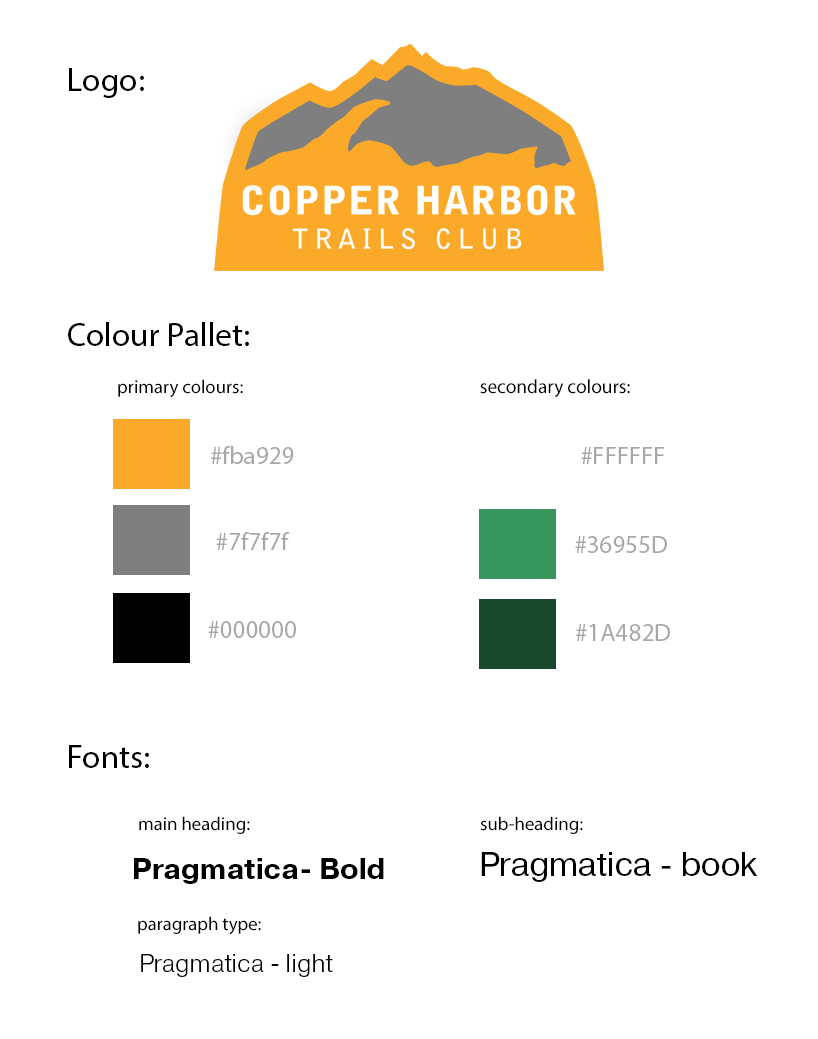
<style>
.page{position:relative;width:818px;height:1039px;background:#ffffff}
.page>*{position:absolute;margin:0}
.t1{font:33.3px "MyriadPro-Regular";color:#000000}
.t2{font:18.7px "MyriadPro-Regular";color:#000000}
.t3{font:19.4px "MyriadPro-Regular";color:#000000}
.t4{font:25px "MyriadPro-Regular";color:#a7a7a7}
.t5{font:12px "MyriadPro-Regular";color:#a7a7a7}
.t6{font:33.3px "Pragmatica-Book";color:#000000}
.t7{font:29.2px "Pragmatica-Bold";color:#000000}
.t8{font:25px "Pragmatica-Light";color:#000000}
</style>
<div class="page">
<p class="t1" style="left:69px;top:68px;width:75px;height:30px">Logo:</p>
<p class="t1" style="left:68px;top:322px;width:181px;height:24px">Colour Pallet:</p>
<p class="t2" style="left:118px;top:379px;width:125px;height:19px">primary colours:</p>
<p class="t3" style="left:480px;top:379px;width:150px;height:19px">secondary colours:</p>
<p class="t4" style="left:211px;top:446px;width:83px;height:18px">#fba929</p>
<p class="t4" style="left:581px;top:447px;width:83px;height:17px">#FFFFFF</p>
<p class="t4" style="left:216px;top:532px;width:74px;height:18px">#7f7f7f</p>
<p class="t5" style="left:575px;top:536px;width:92px;height:17px">#36955D</p>
<p class="t4" style="left:208px;top:621px;width:88px;height:17px">#000000</p>
<p class="t4" style="left:576px;top:624px;width:94px;height:17px">#1A482D</p>
<p class="t1" style="left:69px;top:745px;width:80px;height:23px">Fonts:</p>
<p class="t2" style="left:139px;top:816px;width:111px;height:18px">main heading:</p>
<p class="t2" style="left:480px;top:816px;width:103px;height:18px">sub-heading:</p>
<p class="t6" style="left:481px;top:852px;width:277px;height:30px">Pragmatica - book</p>
<p class="t7" style="left:134px;top:858px;width:250px;height:26px">Pragmatica- Bold</p>
<p class="t2" style="left:138px;top:916px;width:123px;height:19px">paragraph type:</p>
<p class="t8" style="left:141px;top:954px;width:192px;height:23px">Pragmatica - light</p>
</div>
